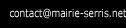
<style>
.page{position:relative;width:126px;height:28px;background:#000000}
.page>*{position:absolute;margin:0}
.t1{font:11px "Verdana";color:#ffffff;scale:0.82 1}
</style>
<div class="page">
<p class="t1" style="left:10px;top:8px;width:117px;height:11px">contact@mairie-serris.net</p>
</div>
